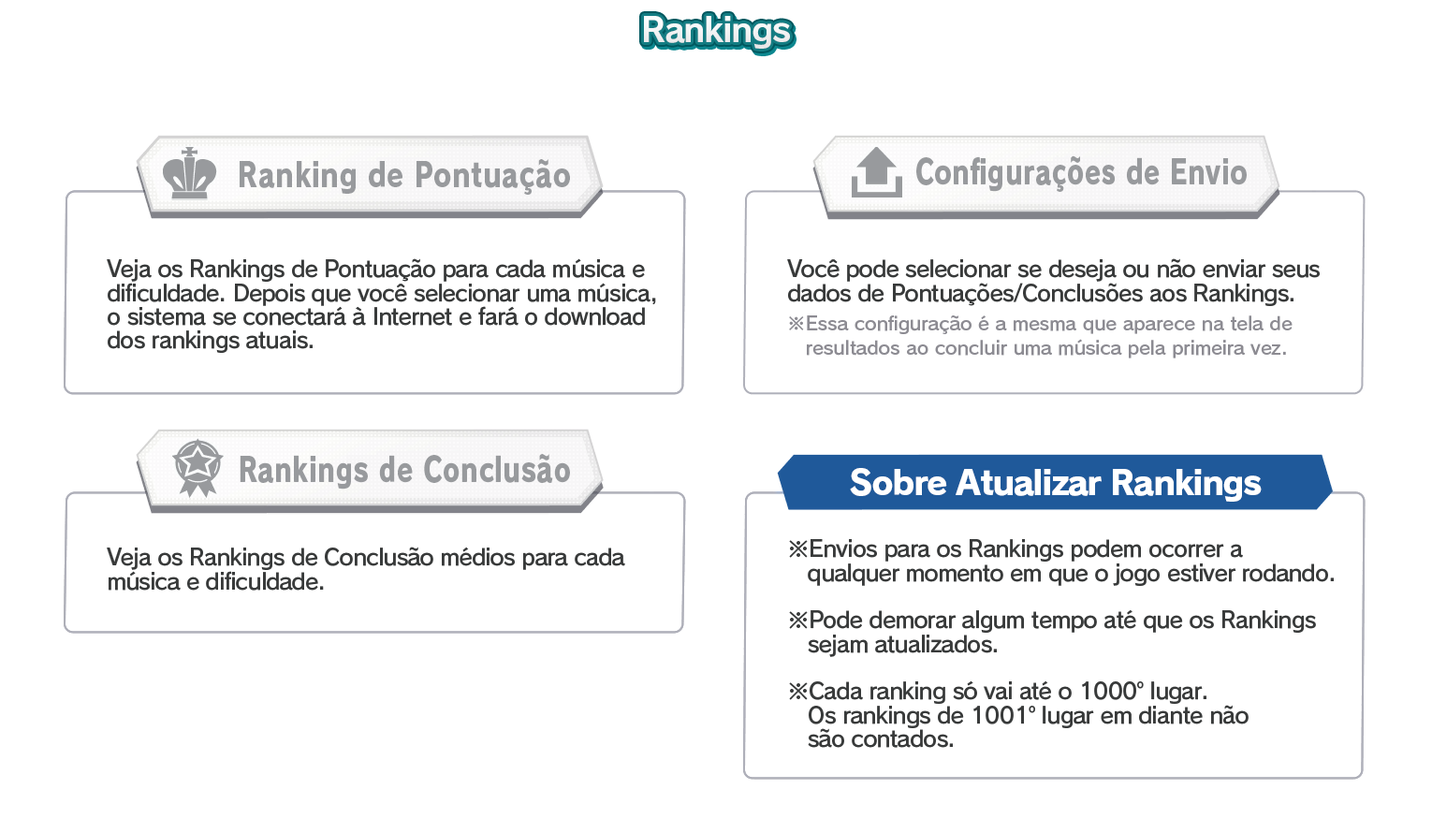
<style>
.page{position:relative;width:1432px;height:833px;background:#ffffff}
.page>*{position:absolute;margin:0}
.t1{font:33.7px "RodinPro-B";letter-spacing:-0.039em;color:#f2f3f3}
.t2{font:33.7px "RodinPro-EB";letter-spacing:0.02em;color:#989a9d;scale:0.81 1}
.t3{font:33.7px "RodinPro-EB";letter-spacing:0.02em;color:#989a9d;scale:0.77 1}
.t4{font:22.5px/23.7px "RodinPro-DB";letter-spacing:-0.04em;color:#383a3a}
.t5{font:18.7px/23.7px "RodinPro-DB";letter-spacing:-0.014em;color:#8c8b92}
.t6{font:33.7px "RodinPro-EB";letter-spacing:-0.048em;color:#ffffff}
</style>
<div class="page">
<p class="t1" style="left:644px;top:16px;width:146px;height:33px">Rankings</p>
<p class="t2" style="left:240px;top:159px;width:330px;height:36px">Ranking de Pontuação</p>
<p class="t3" style="left:916px;top:155px;width:330px;height:37px">Configurações de Envio</p>
<p class="t4" style="left:107px;top:258px;width:549px;height:95px">Veja os Rankings de Pontuação para cada música e<br>dificuldade. Depois que você selecionar uma música,<br>o sistema se conectará à Internet e fará o download<br>dos rankings atuais.</p>
<p class="t4" style="left:787px;top:258px;width:532px;height:48px">Você pode selecionar se deseja ou não enviar seus<br>dados de Pontuações/Conclusões aos Rankings.</p>
<p class="t5" style="left:789px;top:315px;width:503px;height:43px">※Essa configuração é a mesma que aparece na tela de<br>   resultados ao concluir uma música pela primeira vez.</p>
<p class="t3" style="left:240px;top:454px;width:330px;height:35px">Rankings de Conclusão</p>
<p class="t6" style="left:850px;top:468px;width:411px;height:34px">Sobre Atualizar Rankings</p>
<p class="t4" style="left:789px;top:539px;width:544px;height:209px">※Envios para os Rankings podem ocorrer a<br>   qualquer momento em que o jogo estiver rodando.<br><br>※Pode demorar algum tempo até que os Rankings<br>   sejam atualizados.<br><br>※Cada ranking só vai até o 1000º lugar.<br>   Os rankings de 1001º lugar em diante não<br>   são contados.</p>
<p class="t4" style="left:107px;top:546px;width:518px;height:44px">Veja os Rankings de Conclusão médios para cada<br>música e dificuldade.</p>
</div>
